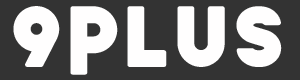
<style>
.page{position:relative;width:300px;height:80px;background:#333333}
.page>*{position:absolute;margin:0}
.t1{font:88.8px "LEonardoSemiHeavy";letter-spacing:0.025em;color:#fffefe}
</style>
<div class="page">
<p class="t1" style="left:13px;top:6px;width:269px;height:69px">9Plus</p>
</div>
